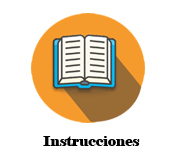
<style>
.page{position:relative;width:173px;height:157px;background:#ffffff}
.page>*{position:absolute;margin:0}
.t1{font:14px "Elephant-Regular";color:#020202}
</style>
<div class="page">
<p class="t1" style="left:43px;top:136px;width:97px;height:10px">Instrucciones</p>
</div>
